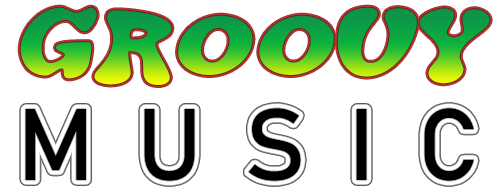
<style>
.page{position:relative;width:500px;height:192px;background:#ffffff}
.page>*{position:absolute;margin:0}
.t1{font:100px "J.Airplane-swash-Italic"}
.t2{font:100px "Bahnschrift";letter-spacing:0.42em;color:#000000}
</style>
<div class="page">
<p class="t1" style="left:20px;top:7px;width:470px;height:78px">GROOVY</p>
<p class="t2" style="left:25px;top:108px;width:449px;height:73px">MUSIC</p>
</div>
